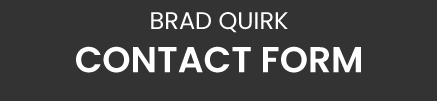
<style>
.page{position:relative;width:437px;height:101px;background:#333333}
.page>*{position:absolute;margin:0}
.t1{font:36px "Poppins-SemiBold";color:#ffffff}
.t2{font:24px "Poppins-Regular";color:#ffffff}
</style>
<div class="page">
<p class="t1" style="left:76px;top:12px;width:285px;height:61px;text-align:center"><span class="t2">BRAD QUIRK<br></span>CONTACT FORM</p>
</div>
